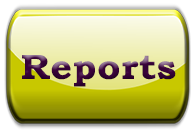
<style>
.page{position:relative;width:195px;height:133px}
.page>*{position:absolute;margin:0}
.t1{font:34.9px "BookmanOldStyle-Bold";letter-spacing:0.02em;color:#3a033b;scale:1.07 1}
</style>
<div class="page">
<p class="t1" style="left:22px;top:55px;width:154px;height:32px">Reports</p>
</div>
